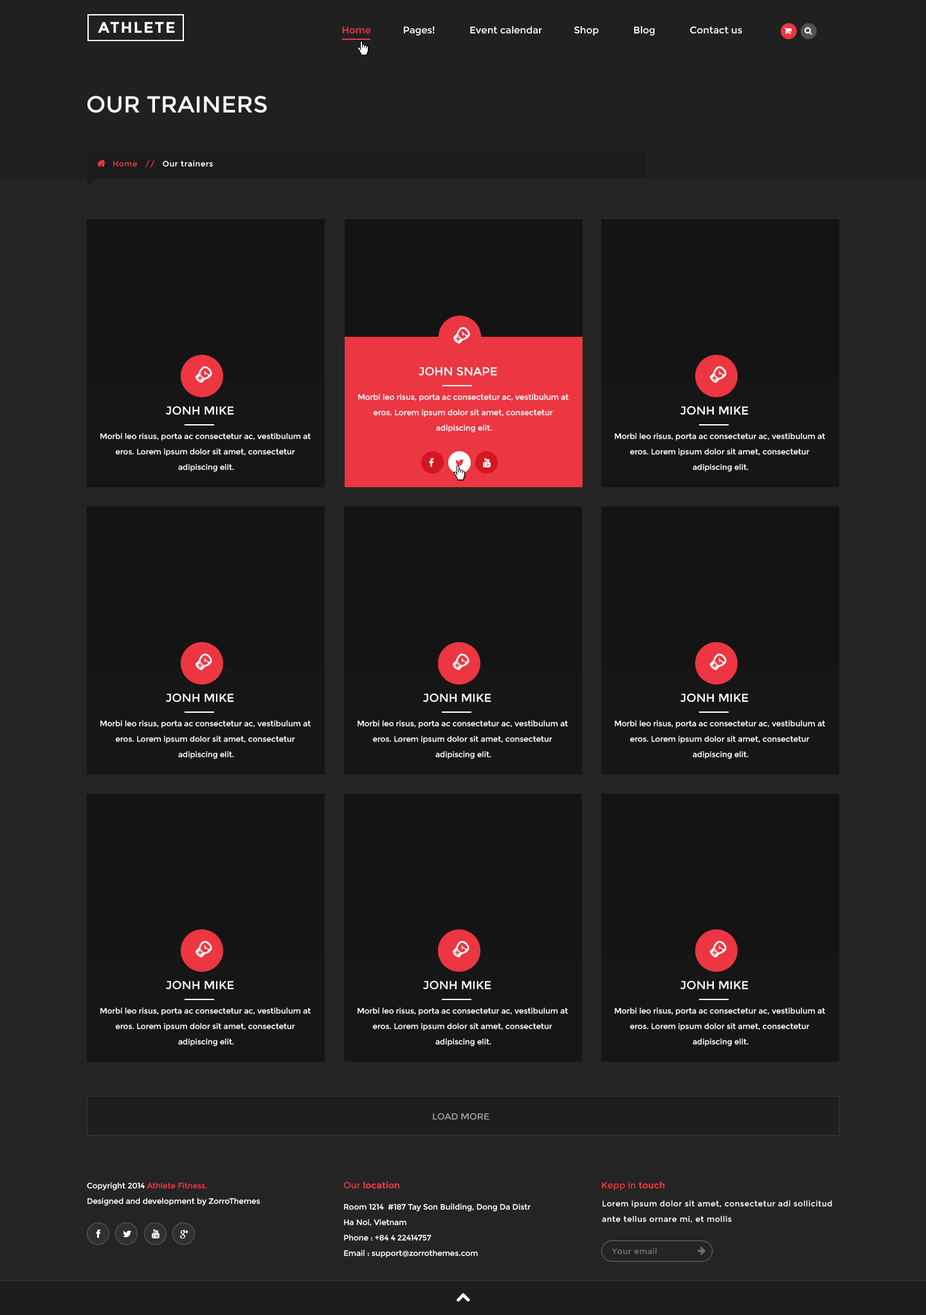
<style>
.page{position:relative;width:926px;height:1315px;background:#242424}
.page>*{position:absolute;margin:0}
.t1{font:15.4px "Montserrat-Bold";letter-spacing:0.075em;color:#ffffff;text-transform:uppercase}
.t2{font:9.6px "Montserrat-Regular";color:#ffffff}
.t3{font:9.6px "Montserrat-Regular";color:#ec3642}
.t4{font:23.1px "Montserrat-Regular";color:#ffffff;text-transform:uppercase}
.t5{font:7.7px "Montserrat-Regular";letter-spacing:0.05em;color:#ffffff}
.t6{font:7.7px "Montserrat-Regular";letter-spacing:0.05em;color:#ec3642}
.t7{font:11.6px "Montserrat-Regular";color:#ffffff;text-transform:uppercase}
.t8{font:7.7px/15.4px "Montserrat-Regular";color:#ffffff}
.t9{font:9px "Montserrat-Regular";color:#a0a0a0;text-transform:uppercase}
.t10{font:9px "Montserrat-Bold";color:#ec3642}
.t11{font:9px "Montserrat-Regular";color:#ec3642}
.t12{font:7.7px/15.4px "Montserrat-Regular";color:#ec3642}
.t13{font:7.7px/15.4px "Montserrat-Regular";letter-spacing:0.05em;color:#ffffff}
.t14{font:7.7px "Montserrat-Regular";letter-spacing:0.05em;color:#717171}
</style>
<div class="page">
<p class="t1" style="left:98px;top:22px;width:77px;height:11px">Athlete</p>
<p class="t2" style="left:342px;top:26px;width:400px;height:10px"><span class="t3">Home  </span>          Pages!             Event calendar            Shop             Blog             Contact us</p>
<p class="t4" style="left:87px;top:96px;width:180px;height:17px">our trainers</p>
<p class="t5" style="left:113px;top:160px;width:100px;height:8px"><span class="t6">Home   //   </span>Our trainers</p>
<p class="t7" style="left:419px;top:367px;width:78px;height:9px">John Snape</p>
<p class="t8" style="left:358px;top:393px;width:211px;height:40px;text-align:center">Morbi leo risus, porta ac consectetur ac, vestibulum at eros. Lorem ipsum dolor sit amet, consectetur<br> adipiscing elit.</p>
<p class="t7" style="left:166px;top:406px;width:68px;height:9px">jonh mike</p>
<p class="t7" style="left:680px;top:406px;width:68px;height:9px">jonh mike</p>
<p class="t8" style="left:100px;top:433px;width:211px;height:39px;text-align:center">Morbi leo risus, porta ac consectetur ac, vestibulum at eros. Lorem ipsum dolor sit amet, consectetur<br> adipiscing elit.</p>
<p class="t8" style="left:615px;top:433px;width:210px;height:39px;text-align:center">Morbi leo risus, porta ac consectetur ac, vestibulum at eros. Lorem ipsum dolor sit amet, consectetur<br> adipiscing elit.</p>
<p class="t7" style="left:166px;top:694px;width:68px;height:9px">jonh mike</p>
<p class="t7" style="left:423px;top:694px;width:68px;height:9px">jonh mike</p>
<p class="t7" style="left:680px;top:694px;width:68px;height:9px">jonh mike</p>
<p class="t8" style="left:100px;top:720px;width:211px;height:39px;text-align:center">Morbi leo risus, porta ac consectetur ac, vestibulum at eros. Lorem ipsum dolor sit amet, consectetur<br> adipiscing elit.</p>
<p class="t8" style="left:357px;top:720px;width:211px;height:39px;text-align:center">Morbi leo risus, porta ac consectetur ac, vestibulum at eros. Lorem ipsum dolor sit amet, consectetur<br> adipiscing elit.</p>
<p class="t8" style="left:615px;top:720px;width:210px;height:39px;text-align:center">Morbi leo risus, porta ac consectetur ac, vestibulum at eros. Lorem ipsum dolor sit amet, consectetur<br> adipiscing elit.</p>
<p class="t7" style="left:166px;top:981px;width:68px;height:9px">jonh mike</p>
<p class="t7" style="left:423px;top:981px;width:68px;height:9px">jonh mike</p>
<p class="t7" style="left:680px;top:981px;width:68px;height:9px">jonh mike</p>
<p class="t8" style="left:100px;top:1007px;width:211px;height:40px;text-align:center">Morbi leo risus, porta ac consectetur ac, vestibulum at eros. Lorem ipsum dolor sit amet, consectetur<br> adipiscing elit.</p>
<p class="t8" style="left:357px;top:1007px;width:211px;height:40px;text-align:center">Morbi leo risus, porta ac consectetur ac, vestibulum at eros. Lorem ipsum dolor sit amet, consectetur<br> adipiscing elit.</p>
<p class="t8" style="left:615px;top:1007px;width:210px;height:40px;text-align:center">Morbi leo risus, porta ac consectetur ac, vestibulum at eros. Lorem ipsum dolor sit amet, consectetur<br> adipiscing elit.</p>
<p class="t9" style="left:433px;top:1113px;width:56px;height:7px">load more</p>
<p class="t10" style="left:343px;top:1182px;width:57px;height:7px"><span class="t11">Our </span>location</p>
<p class="t11" style="left:602px;top:1182px;width:63px;height:9px">Kepp in <span class="t10">touch</span></p>
<p class="t8" style="left:87px;top:1182px;width:173px;height:24px">Copyright 2014 <span class="t12">Athlete Fitness. <br></span>Designed and development by ZorroThemes</p>
<p class="t8" style="left:344px;top:1203px;width:186px;height:55px">Room 1214  #187 Tay Son Building, Dong Da Distr<br>Ha Noi, Vietnam<br>Phone : +84 4 22414757<br>Email : support@zorrothemes.com</p>
<p class="t13" style="left:602px;top:1200px;width:230px;height:23px">Lorem ipsum dolor sit amet, consectetur adi sollicitud ante tellus ornare mi, et mollis</p>
<p class="t14" style="left:611px;top:1248px;width:45px;height:7px">Your email</p>
</div>
